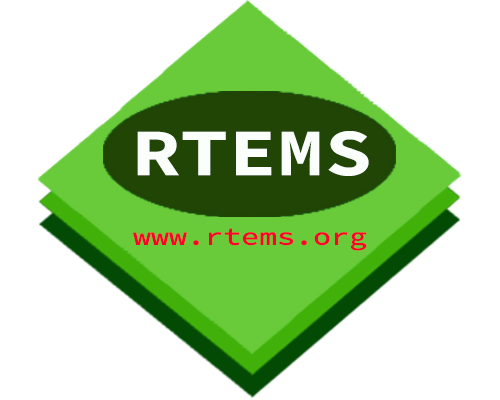
<style>
.page{position:relative;width:500px;height:400px;background:#ffffff}
.page>*{position:absolute;margin:0}
.t1{font:66.7px "SourceCodePro-Bold";color:#fcfffb;scale:1.2 1}
.t2{font:25px "SourceCodeRoman-Medium";color:#ff002b;scale:1.2 1}
</style>
<div class="page">
<p class="t1" style="left:137px;top:131px;width:232px;height:45px">RTEMS</p>
<p class="t2" style="left:133px;top:228px;width:234px;height:23px">www.rtems.org</p>
</div>
